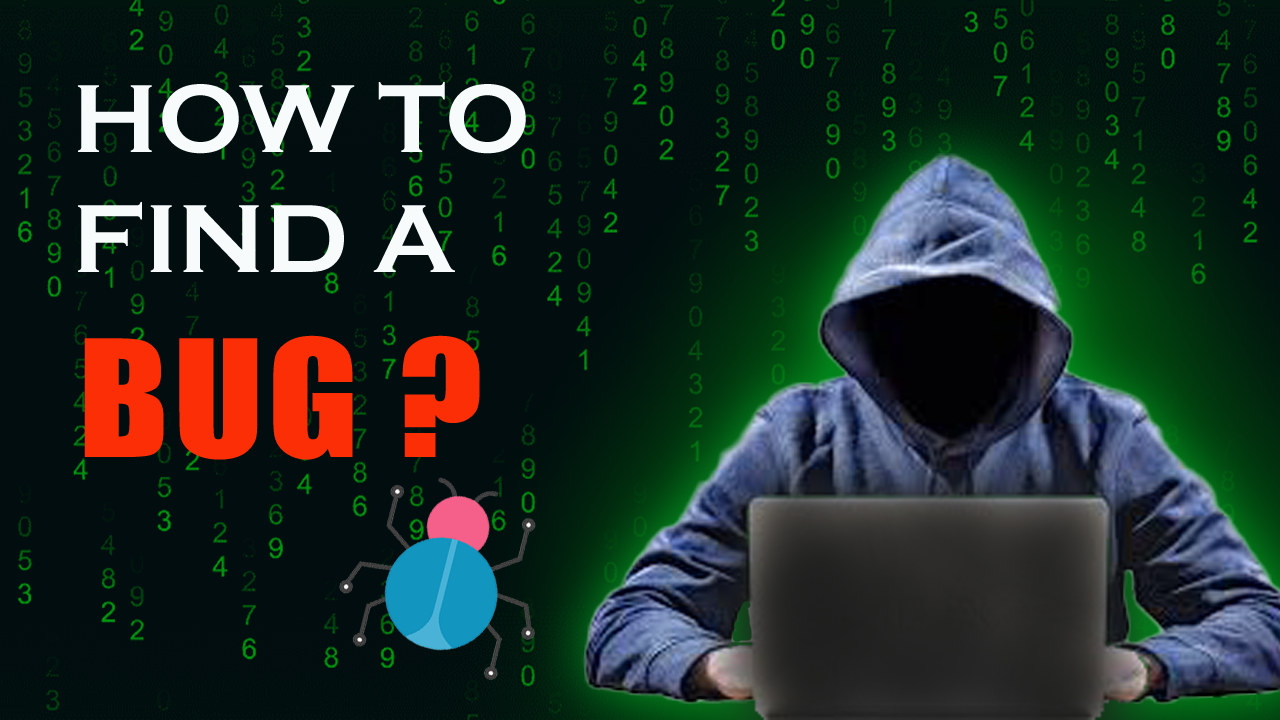
<style>
.page{position:relative;width:1280px;height:720px;background:#010d0e}
.page>*{position:absolute;margin:0}
.t1{font:100px "CopperplateGothic-Bold";color:#f7fbfb}
.t2{font:150px "Impact";letter-spacing:0.025em;color:#fb2e06;scale:1.1 1}
</style>
<div class="page">
<p class="t1" style="left:78px;top:82px;width:448px;height:190px">HOW TO<br>FIND A</p>
<p class="t2" style="left:84px;top:335px;width:396px;height:125px">BUG ?</p>
</div>
